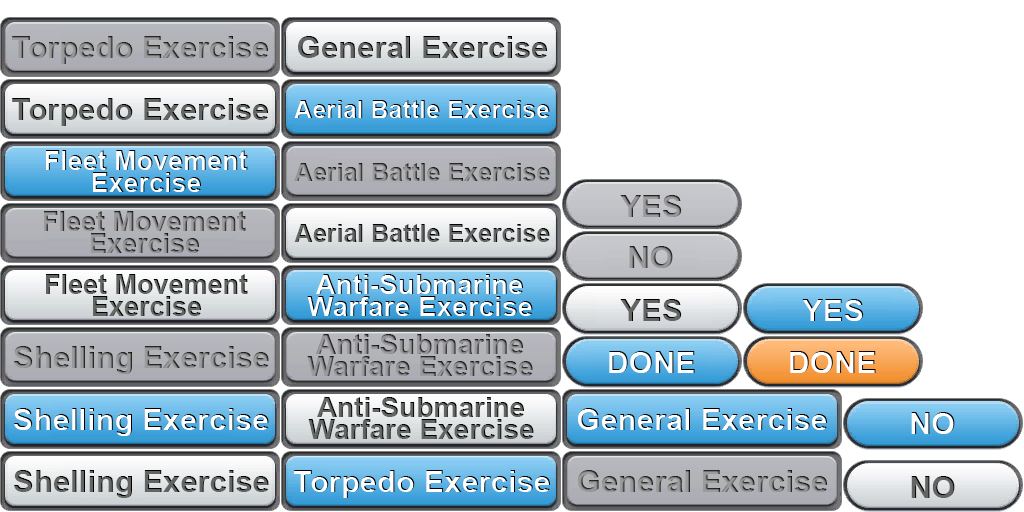
<style>
.page{position:relative;width:1024px;height:512px;background:#ffffff}
.page>*{position:absolute;margin:0}
.t1{font:31px "Arial-BoldMT"}
.t2{font:31px "Arial-BoldMT";color:#636563}
.t3{font:25px "Arial-BoldMT";color:#ffffff}
.t4{font:27px/22px "Arial-BoldMT";color:#ffffff}
.t5{font:25px "Arial-BoldMT"}
.t6{font:27px/22px "Arial-BoldMT"}
.t7{font:25px "Arial-BoldMT";color:#636563}
.t8{font:31px "Arial-BoldMT";color:#9c9b9c}
.t9{font:27px/22px "Arial-BoldMT";color:#636563}
.t10{font:28px/22px "Arial-BoldMT";color:#ffffff}
.t11{font:31px "Arial-BoldMT";color:#ffffff}
.t12{font:28px/22px "Arial-BoldMT"}
.t13{font:28px/22px "Arial-BoldMT";color:#636563}
</style>
<div class="page">
<p class="t1" style="left:12px;top:36px;width:256px;height:28px">Torpedo Exercise</p>
<p class="t2" style="left:298px;top:36px;width:249px;height:22px">General Exercise</p>
<p class="t2" style="left:12px;top:98px;width:256px;height:28px">Torpedo Exercise</p>
<p class="t3" style="left:294px;top:100px;width:256px;height:18px">Aerial Battle Exercise</p>
<p class="t4" style="left:46px;top:150px;width:202px;height:42px;text-align:center">Fleet Movement <br>    Exercise</p>
<p class="t5" style="left:294px;top:163px;width:256px;height:18px">Aerial Battle Exercise</p>
<p class="t1" style="left:620px;top:195px;width:62px;height:22px">YES</p>
<p class="t6" style="left:44px;top:211px;width:202px;height:42px;text-align:center">Fleet Movement <br>    Exercise</p>
<p class="t7" style="left:294px;top:224px;width:256px;height:18px">Aerial Battle Exercise</p>
<p class="t8" style="left:629px;top:246px;width:44px;height:22px">NO</p>
<p class="t9" style="left:46px;top:274px;width:202px;height:42px;text-align:center">Fleet Movement <br>    Exercise</p>
<p class="t10" style="left:307px;top:274px;width:226px;height:42px;text-align:center">Anti-Submarine <br>Warfare Exercise</p>
<p class="t2" style="left:620px;top:299px;width:62px;height:22px">YES</p>
<p class="t11" style="left:802px;top:299px;width:62px;height:22px">YES</p>
<p class="t12" style="left:307px;top:334px;width:226px;height:42px;text-align:center">Anti-Submarine <br>Warfare Exercise</p>
<p class="t1" style="left:14px;top:346px;width:255px;height:28px">Shelling Exercise</p>
<p class="t11" style="left:609px;top:351px;width:86px;height:22px">DONE</p>
<p class="t11" style="left:790px;top:351px;width:86px;height:22px">DONE</p>
<p class="t13" style="left:308px;top:397px;width:226px;height:42px;text-align:center">Anti-Submarine <br>Warfare Exercise</p>
<p class="t11" style="left:14px;top:408px;width:255px;height:28px">Shelling Exercise</p>
<p class="t11" style="left:578px;top:408px;width:249px;height:22px">General Exercise</p>
<p class="t11" style="left:911px;top:412px;width:44px;height:22px">NO</p>
<p class="t2" style="left:14px;top:470px;width:255px;height:28px">Shelling Exercise</p>
<p class="t11" style="left:294px;top:470px;width:256px;height:28px">Torpedo Exercise</p>
<p class="t1" style="left:578px;top:470px;width:249px;height:22px">General Exercise</p>
<p class="t2" style="left:911px;top:476px;width:44px;height:22px">NO</p>
</div>
